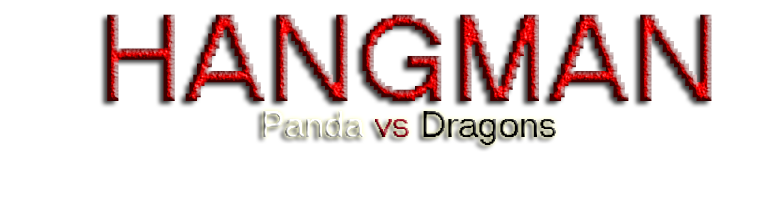
<style>
.page{position:relative;width:782px;height:221px;background:#ffffff}
.page>*{position:absolute;margin:0}
.t1{font:120px "MS Sans Serif"}
.t2{font:36px "MS Sans Serif"}
</style>
<div class="page">
<p class="t1" style="left:107px;top:14px;width:605px;height:87px">HANGMAN</p>
<p class="t2" style="left:263px;top:111px;width:293px;height:34px">Panda vs Dragons</p>
</div>
